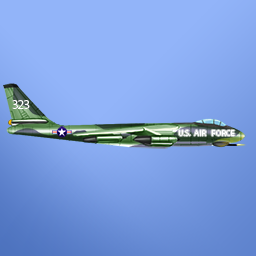
<style>
.page{position:relative;width:256px;height:256px;background:#92b4f9}
.page>*{position:absolute;margin:0}
.t1{font:13.5px "MyriadPro-Regular";letter-spacing:-0.08em;color:#ffffff}
.t2{font:8.4px "MyriadPro-Regular";color:#ffffff}
</style>
<div class="page">
<p class="t1" style="left:12px;top:100px;width:18px;height:9px">323</p>
<p class="t1" style="left:12px;top:100px;width:18px;height:9px">323</p>
<p class="t2" style="left:178px;top:130px;width:57px;height:6px">U.S.  AIR   FORCE</p>
<p class="t2" style="left:178px;top:130px;width:57px;height:6px">U.S.  AIR   FORCE</p>
</div>
